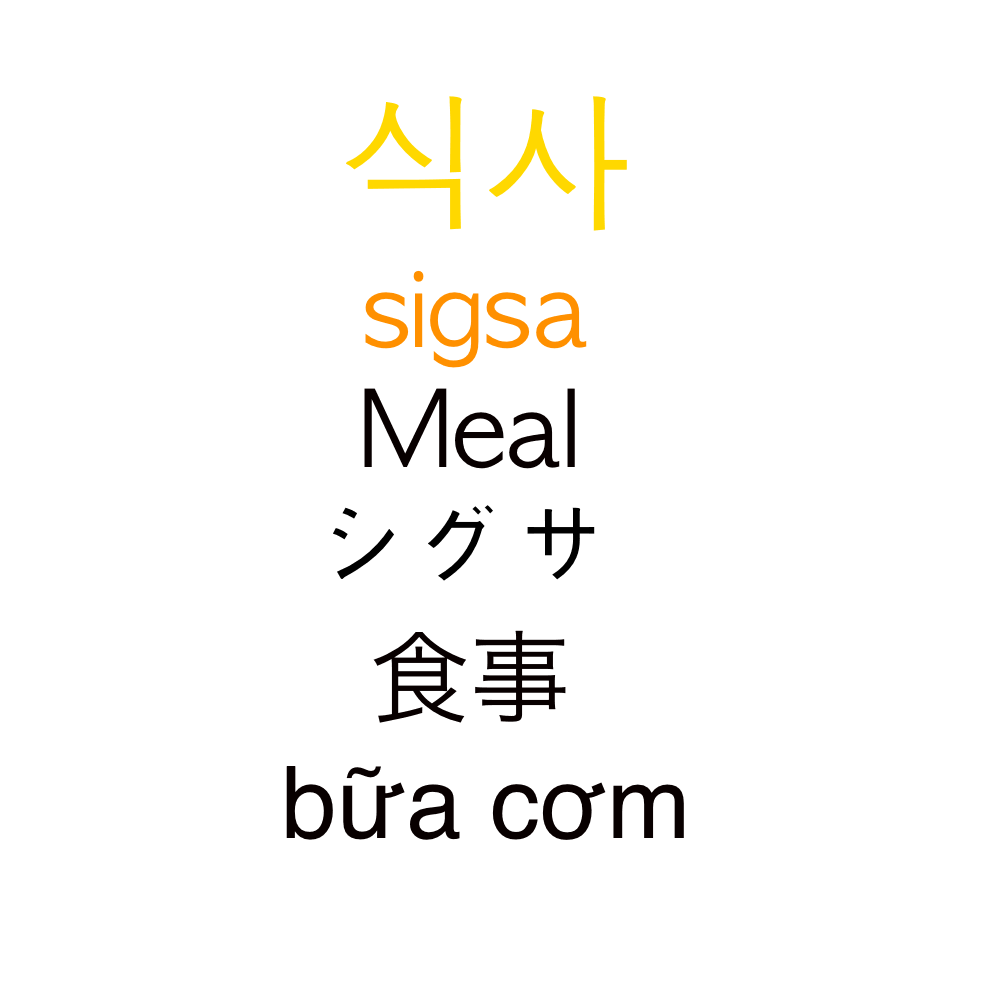
<style>
.page{position:relative;width:1000px;height:1000px;background:#ffffff}
.page>*{position:absolute;margin:0}
.t1{font:150px "AppleGothic";color:#ffd800}
.t2{font:100px "AppleGothic";color:#ff9000}
.t3{font:100px "AppleGothic";color:#080000}
.t4{font:100px "AppleGothic";color:#000000}
.t5{font:100px "HiraKakuProN-W3";color:#080000}
.t6{font:100px "Helvetica";color:#080000}
</style>
<div class="page">
<p class="t1" style="left:346px;top:96px;width:281px;height:135px">식사</p>
<p class="t2" style="left:365px;top:270px;width:222px;height:98px">sigsa</p>
<p class="t3" style="left:364px;top:388px;width:211px;height:81px">Meal</p>
<p class="t4" style="left:333px;top:505px;width:262px;height:76px">シグサ</p>
<p class="t5" style="left:373px;top:630px;width:193px;height:93px">食事</p>
<p class="t6" style="left:286px;top:766px;width:398px;height:74px">bữa cơm</p>
</div>
